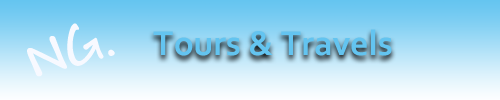
<style>
.page{position:relative;width:500px;height:100px}
.page>*{position:absolute;margin:0}
.t1{font:36px "Corbel-Bold";color:#63c4f0}
</style>
<div class="page">
<p class="t1" style="left:153px;top:29px;width:239px;height:27px">Tours &amp; Travels</p>
</div>
